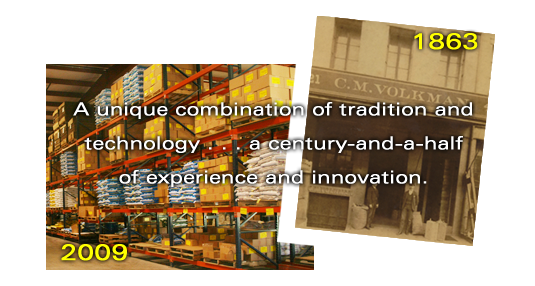
<style>
.page{position:relative;width:535px;height:286px;background:#ffffff}
.page>*{position:absolute;margin:0}
.t1{font:22.7px "ZurichBT-RomanExtended";color:#feff00;font-weight:bold}
.t2{font:18px/34.1px "ZurichBT-RomanExtended";color:#ffffff;font-weight:bold}
</style>
<div class="page">
<p class="t1" style="left:414px;top:33px;width:64px;height:17px">1863</p>
<p class="t2" style="left:73px;top:102px;width:400px;height:85px;text-align:center">A unique combination of tradition and  technology . . . a century-and-a-half of experience and innovation.</p>
<p class="t1" style="left:61px;top:244px;width:66px;height:17px">2009</p>
</div>
